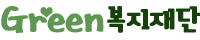
<style>
.page{position:relative;width:200px;height:40px;background:#ffffff}
.page>*{position:absolute;margin:0}
.t1{font:45.4px "HYbdaM";letter-spacing:-0.05em;color:#5f9752;font-weight:bold;scale:0.88 1}
.t2{font:30.2px "icTTDongnechaekbangB";letter-spacing:-0.05em;color:#15420b;font-weight:bold;scale:1.05 1}
</style>
<div class="page">
<p class="t1" style="left:1px;top:6px;width:103px;height:28px">Green</p>
<p class="t2" style="left:107px;top:6px;width:94px;height:27px">복지재단</p>
</div>
